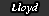
<style>
.page{position:relative;width:49px;height:16px;background:#333333}
.page>*{position:absolute;margin:0}
.t1{font:14px "Vijaya-Bold";color:#ffffff}
</style>
<div class="page">
<p class="t1" style="left:12px;top:3px;width:26px;height:11px">Lloyd</p>
</div>
